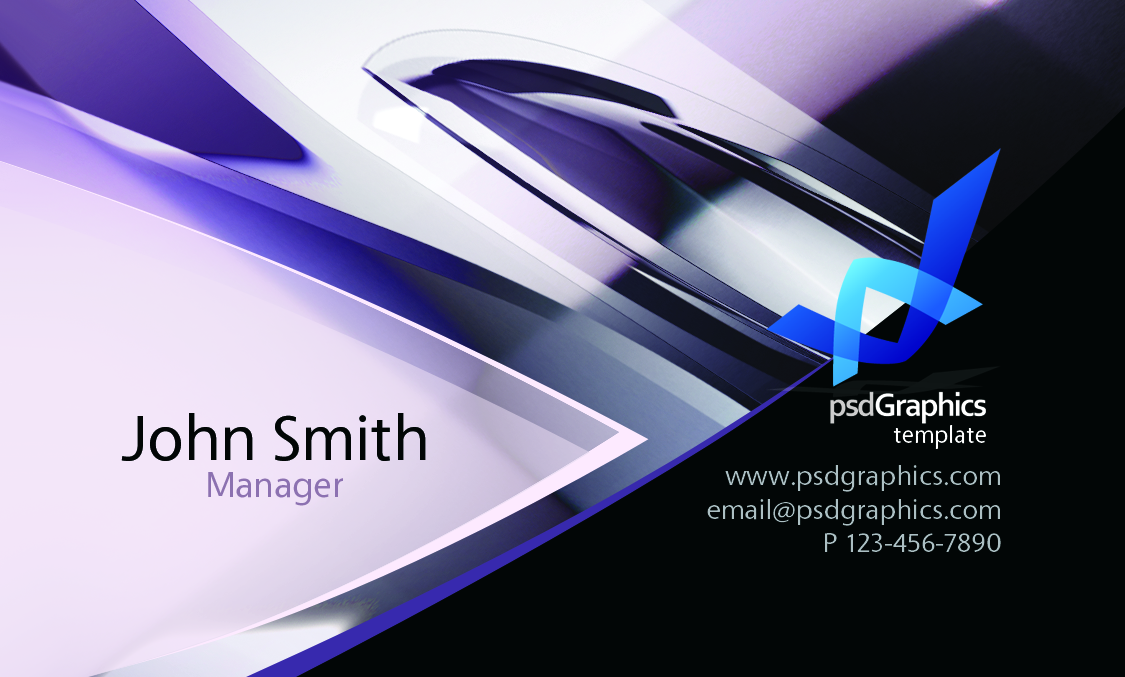
<style>
.page{position:relative;width:1125px;height:677px;background:#020606}
.page>*{position:absolute;margin:0}
.t1{font:66.7px/68.6px "Vegur-Regular";color:#020606}
.t2{font:37.5px/37.5px "Vegur-Regular";color:#8c71b1}
.t3{font:25px "Vegur-Regular";color:#ffffff}
.t4{font:29.2px/33.3px "Vegur-Regular";color:#acbfc3}
</style>
<div class="page">
<p class="t1" style="left:121px;top:413px;width:305px;height:93px;text-align:center">John Smith<br><span class="t2">Manager</span></p>
<p class="t3" style="left:893px;top:425px;width:93px;height:24px">template</p>
<p class="t4" style="left:707px;top:465px;width:294px;height:87px;text-align:right">www.psdgraphics.com<br>email@psdgraphics.com<br>P 123-456-7890</p>
</div>
